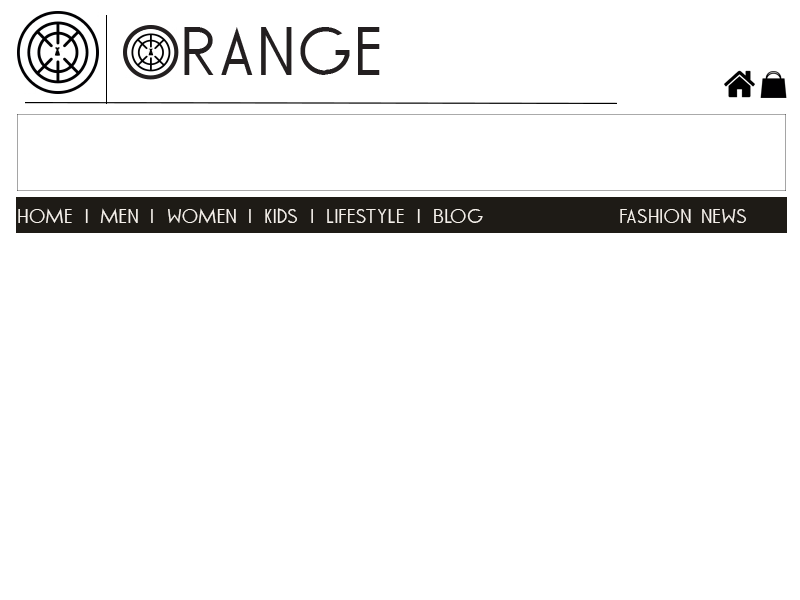
<style>
.page{position:relative;width:800px;height:600px;background:#ffffff}
.page>*{position:absolute;margin:0}
.t1{font:18px "TOMMYHILFIGERAF";color:#f5f0ea}
</style>
<div class="page">
<p class="t1" style="left:18px;top:208px;width:728px;height:15px">HOME | MEN | WOMEN | KIDS | LIfestyle | BLOG               FASHION NEWS</p>
</div>
